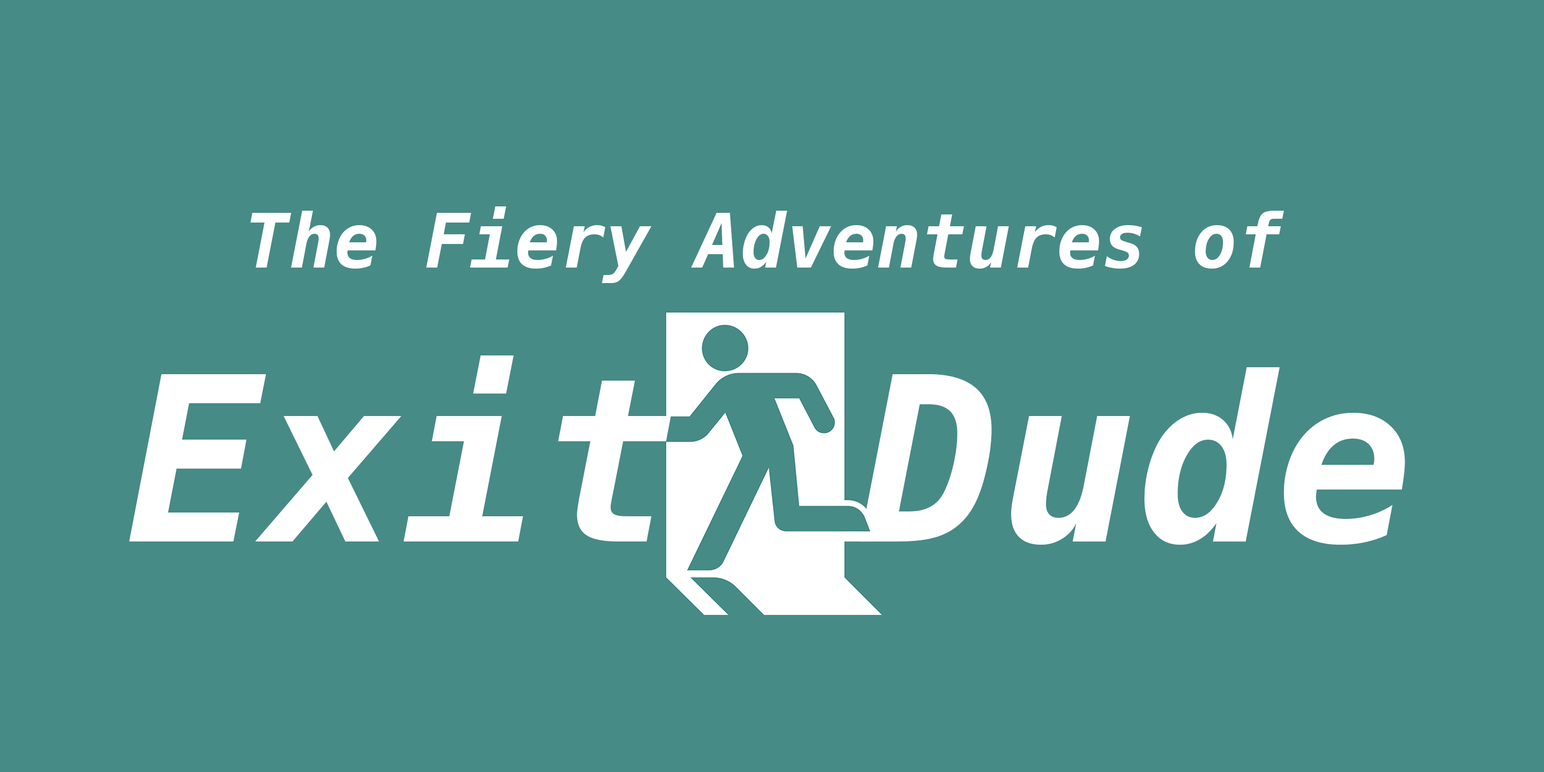
<style>
.page{position:relative;width:1544px;height:772px;background:#468b86}
.page>*{position:absolute;margin:0}
.t1{font:75px "Menlo-BoldItalic";color:#ffffff}
.t2{font:229.3px "Menlo-BoldItalic";color:#ffffff}
</style>
<div class="page">
<p class="t1" style="left:250px;top:206px;width:1034px;height:77px">The Fiery Adventures of</p>
<p class="t2" style="left:129px;top:356px;width:542px;height:186px">Exit</p>
<p class="t2" style="left:860px;top:367px;width:545px;height:178px">Dude</p>
</div>
